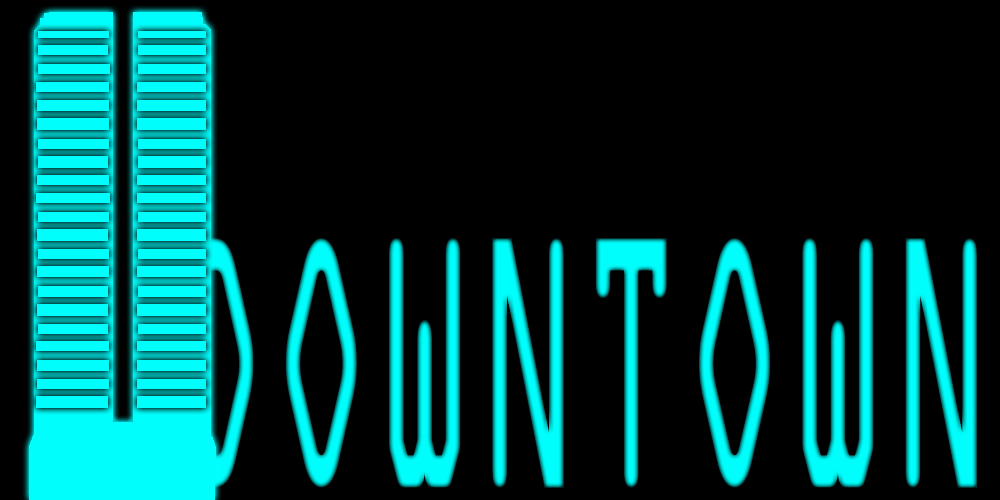
<style>
.page{position:relative;width:1000px;height:500px;background:#000000}
.page>*{position:absolute;margin:0}
.t1{font:319.9px "OCRAStd";scale:0.45 1}
</style>
<div class="page">
<p class="t1" style="left:182px;top:238px;width:795px;height:250px">DOWNTOWN</p>
</div>
